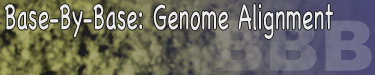
<style>
.page{position:relative;width:375px;height:75px}
.page>*{position:absolute;margin:0}
.t1{font:36px "Chalkboard";letter-spacing:0.01em;color:#ebebeb;scale:0.59 1}
</style>
<div class="page">
<p class="t1" style="left:5px;top:3px;width:328px;height:36px">Base-By-Base: Genome Alignment</p>
</div>
